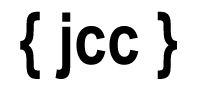
<style>
.page{position:relative;width:200px;height:90px;background:#ffffff}
.page>*{position:absolute;margin:0}
.t1{font:72px "ArialNarrow-Bold";color:#000000}
</style>
<div class="page">
<p class="t1" style="left:20px;top:11px;width:157px;height:68px">{ jcc }</p>
</div>
